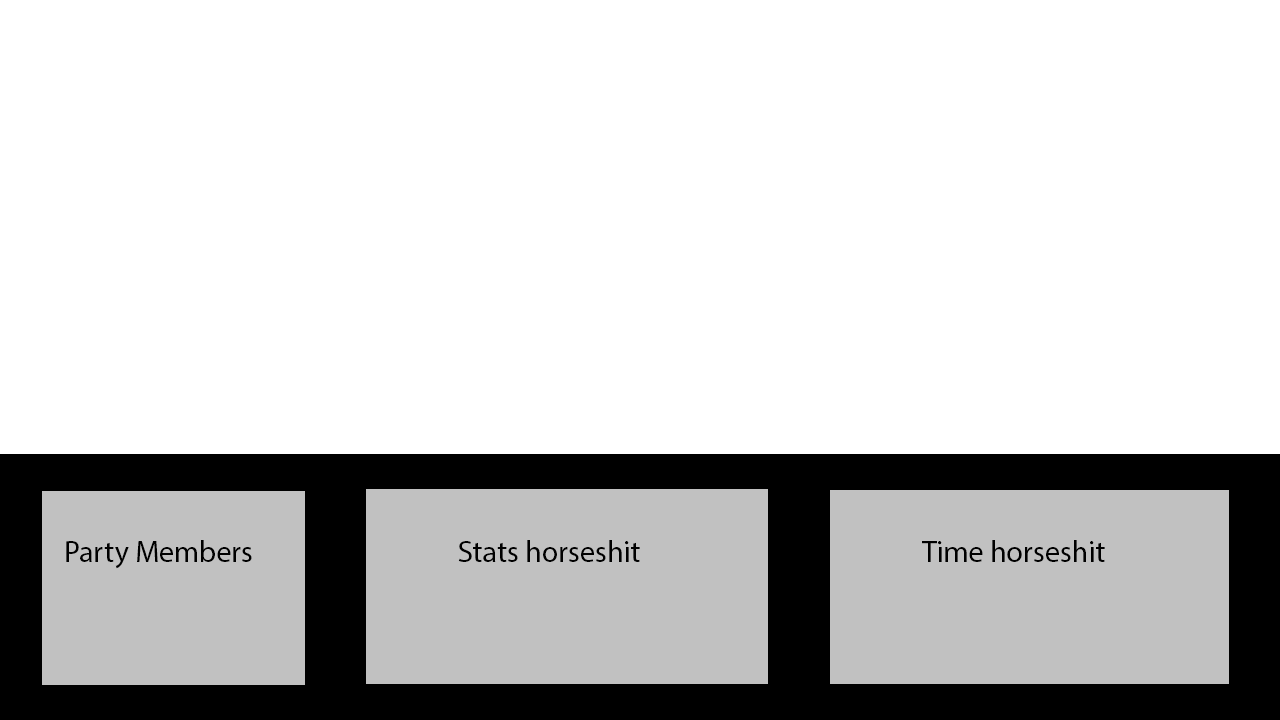
<style>
.page{position:relative;width:1280px;height:720px;background:#ffffff}
.page>*{position:absolute;margin:0}
.t1{font:30px "MyriadPro-Regular";color:#000000}
</style>
<div class="page">
<p class="t1" style="left:66px;top:540px;width:186px;height:29px">Party Members</p>
<p class="t1" style="left:458px;top:540px;width:182px;height:22px">Stats horseshit</p>
<p class="t1" style="left:922px;top:540px;width:183px;height:22px">Time horseshit</p>
</div>
